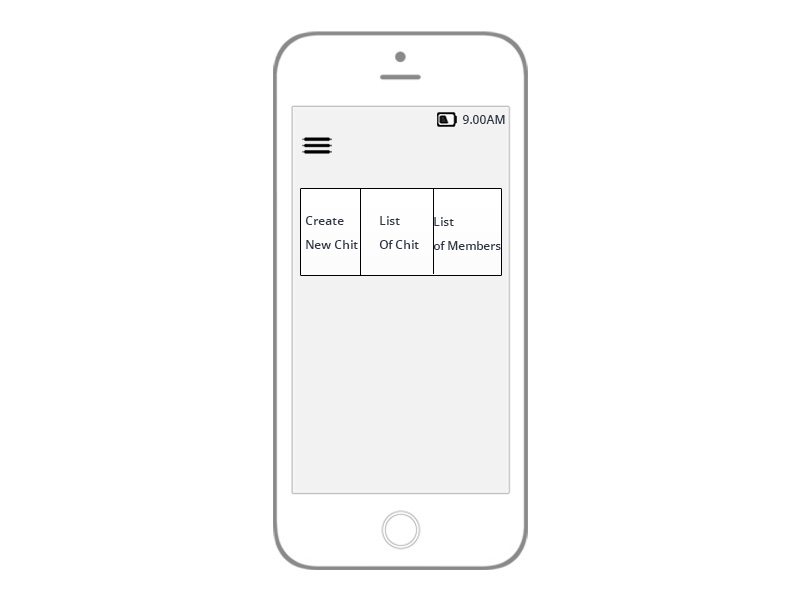
<style>
.page{position:relative;width:800px;height:600px;background:#ffffff}
.page>*{position:absolute;margin:0}
.t1{font:12px "OpenSans-Semibold";color:#2c3445}
.t2{font:12px/6px "OpenSans-Semibold";color:#2c3445}
</style>
<div class="page">
<p class="t1" style="left:462px;top:115px;width:43px;height:9px">9.00AM</p>
<p class="t2" style="left:305px;top:216px;width:53px;height:33px">Create <br><br><br><br>New Chit</p>
<p class="t2" style="left:379px;top:216px;width:40px;height:33px">List<br> <br><br><br>Of Chit</p>
<p class="t2" style="left:433px;top:217px;width:68px;height:33px">List<br> <br><br><br>of Members</p>
</div>
